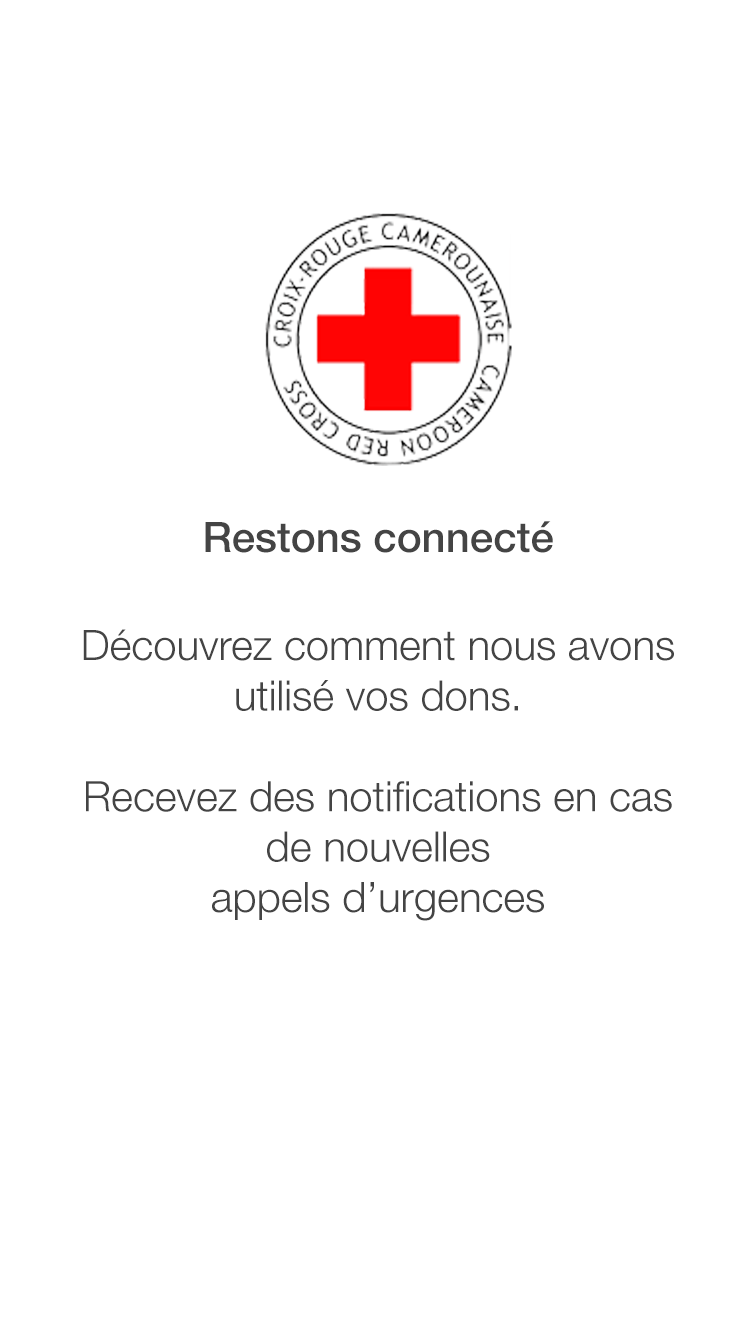
<style>
.page{position:relative;width:750px;height:1334px;background:#ffffff}
.page>*{position:absolute;margin:0}
.t1{font:42px "HelveticaNeue-Medium";color:#444444}
.t2{font:42px "HelveticaNeue-Light";color:#444444}
</style>
<div class="page">
<p class="t1" style="left:205px;top:521px;width:348px;height:32px">Restons connecté</p>
<p class="t2" style="left:83px;top:629px;width:591px;height:292px;text-align:center">Découvrez comment nous avons utilisé vos dons.<br><br>Recevez des notifications en cas de nouvelles <br>appels d’urgences</p>
</div>
